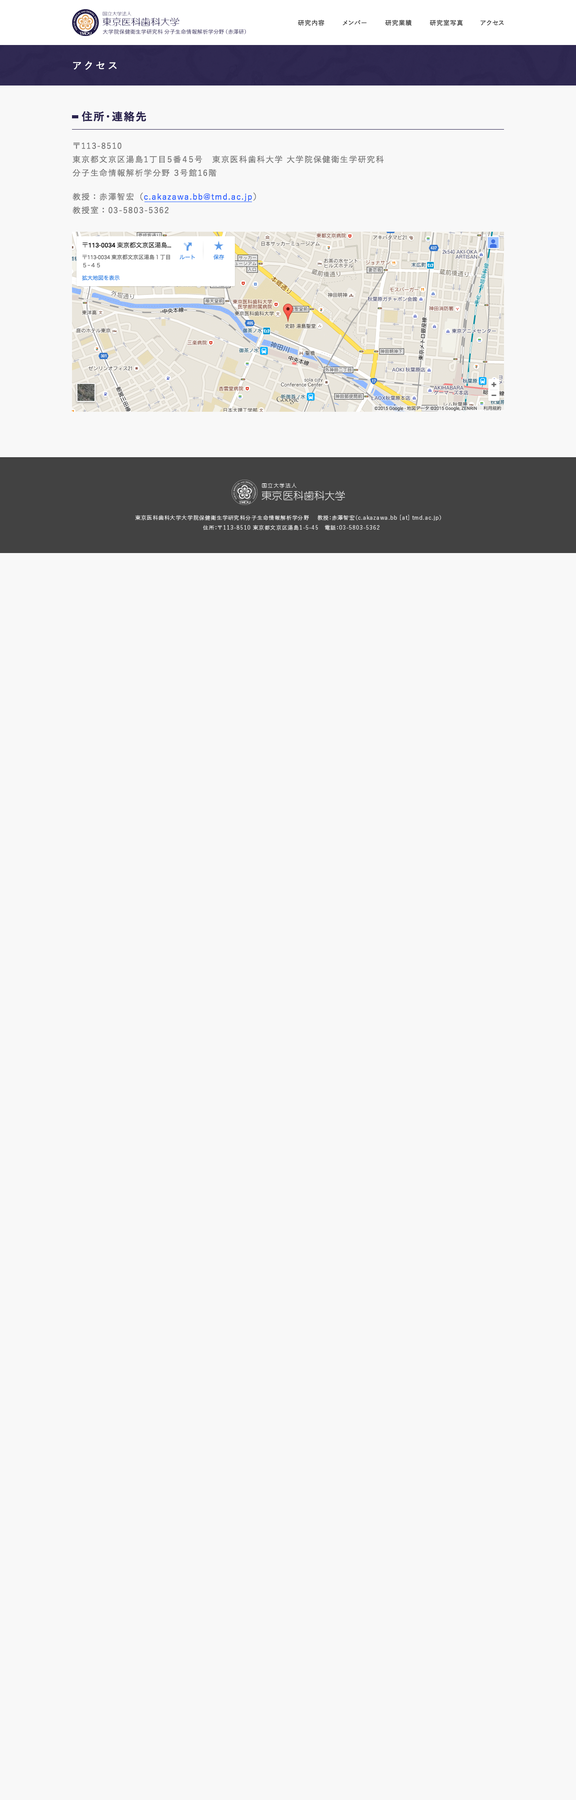
<style>
.page{position:relative;width:576px;height:1800px;background:#f8f8f8}
.page>*{position:absolute;margin:0}
.t1{font:9.9px "YuGo-Medium";letter-spacing:0.3em;color:#ffffff}
.t2{font:10.8px "YuGo-Bold";letter-spacing:0.1em;color:#2a234f}
.t3{font:8.1px/13.5px "YuGo-Medium";letter-spacing:0.1em;color:#797979}
.t4{font:8.1px/13.5px "YuGo-Medium";letter-spacing:0.1em;color:#2962ff}
</style>
<div class="page">
<p class="t1" style="left:73px;top:61px;width:44px;height:9px">アクセス</p>
<p class="t2" style="left:81px;top:111px;width:65px;height:11px">住所・連絡先</p>
<p class="t3" style="left:72px;top:142px;width:312px;height:35px;text-align:justify">〒113-8510<br>東京都文京区湯島1丁目５番４５号　東京医科歯科大学 大学院保健衛生学研究科<br>分子生命情報解析学分野 ３号館16階</p>
<p class="t4" style="left:72px;top:192px;width:184px;height:22px;text-align:justify"><span class="t3">教授：赤澤智宏（</span>c.akazawa.bb@tmd.ac.jp<span class="t3">）<br>教授室：03-5803-5362</span></p>
</div>
